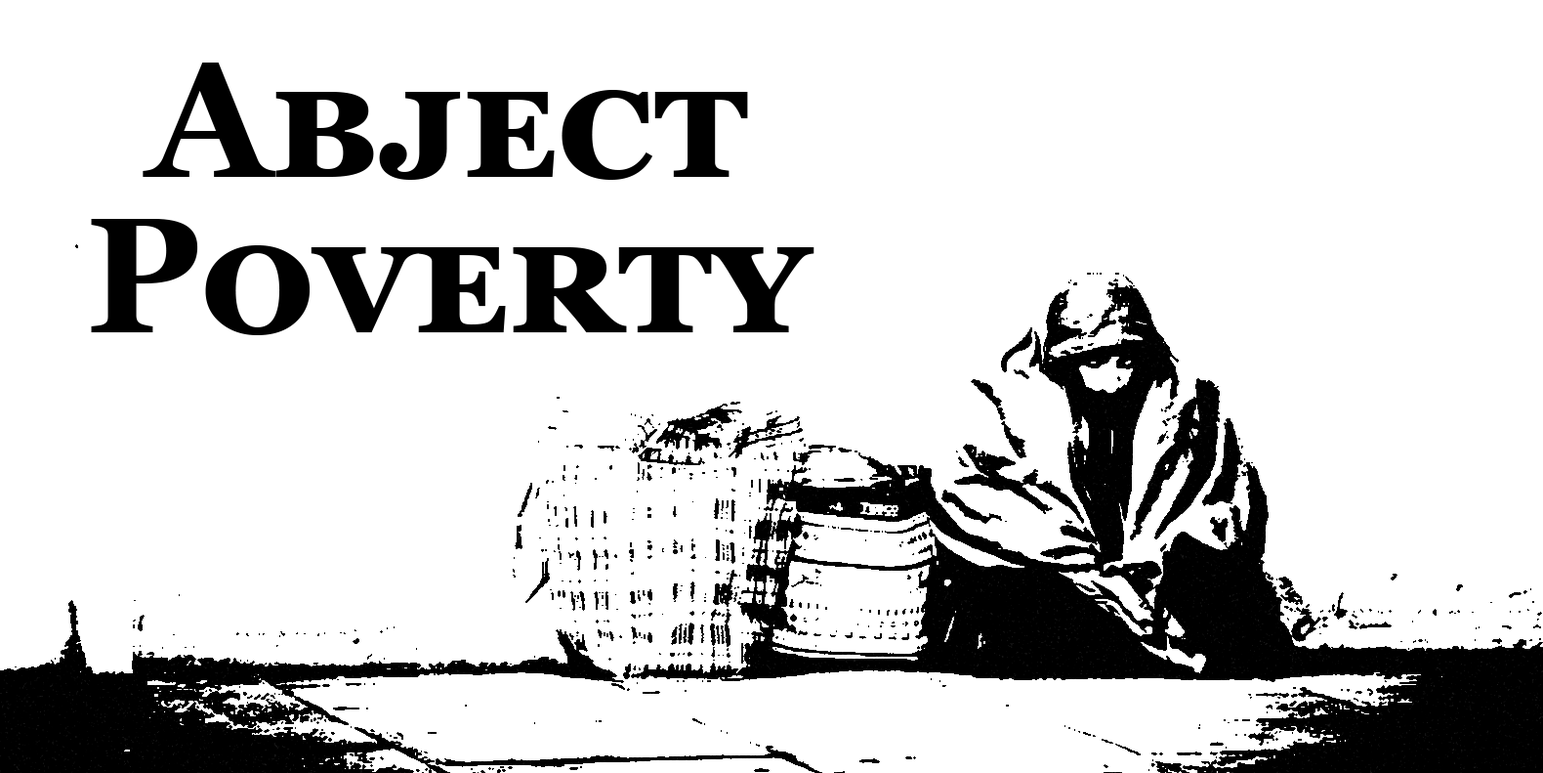
<style>
.page{position:relative;width:1543px;height:773px;background:#ffffff}
.page>*{position:absolute;margin:0}
.t1{font:162.8px "Georgia-Bold";color:#000000;font-variant:small-caps}
</style>
<div class="page">
<p class="t1" style="left:91px;top:63px;width:724px;height:272px">Abject Poverty</p>
</div>
